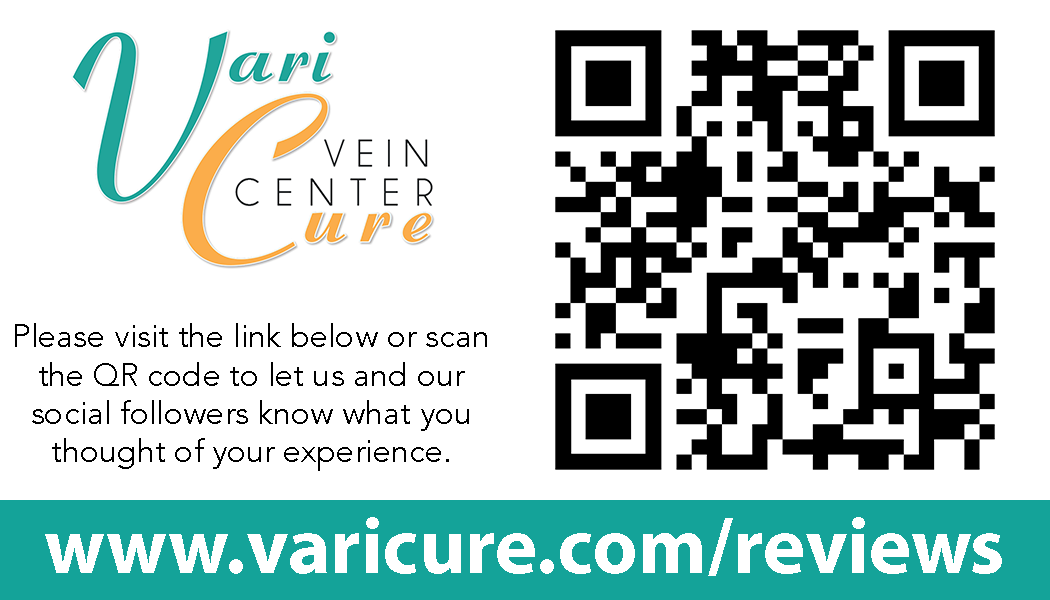
<style>
.page{position:relative;width:1050px;height:600px;background:#ffffff}
.page>*{position:absolute;margin:0}
.t1{font:32px "Avenir-Book";color:#000000}
.t2{font:80px "MyriadPro-Bold";color:#ffffff}
</style>
<div class="page">
<p class="t1" style="left:15px;top:323px;width:472px;height:148px;text-align:center">Please visit the link below or scan the QR code to let us and our social followers know what you thought of your experience.</p>
<p class="t2" style="left:45px;top:517px;width:957px;height:59px">www.varicure.com/reviews</p>
</div>
